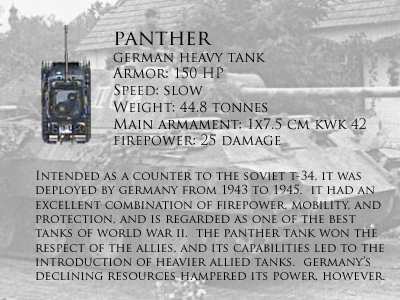
<style>
.page{position:relative;width:400px;height:300px}
.page>*{position:absolute;margin:0}
.t1{font:13.9px "TrajanPro-Regular";color:#000000}
.t2{font:20.9px "TrajanPro-Regular";color:#000000}
.t3{font:12px "TrajanPro-Regular";color:#000000}
</style>
<div class="page">
<p class="t1" style="left:112px;top:31px;width:254px;height:115px"><span class="t2">panther<br></span>german heavy tank<br>Armor: 150 HP<br>Speed: slow<br>Weight: 44.8 tonnes<br>Main armament: 1x7.5 cm kwk 42<br>firepower: 25 damage</p>
<p class="t3" style="left:35px;top:170px;width:350px;height:111px">Intended as a counter to the soviet t-34, it was<br>deployed by germany from 1943 to 1945.  it had an<br>excellent combination of firepower, mobility, and<br>protection, and is regarded as one of the best<br>tanks of world war ii.  the panther tank won the<br>respect of the allies, and its capabilities led to the<br>introduction of heavier allied tanks.  germany’s<br>declining resources hampered its power, however.</p>
</div>
